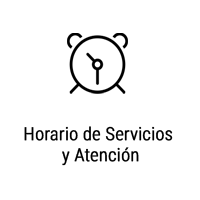
<style>
.page{position:relative;width:200px;height:200px;background:#ffffff}
.page>*{position:absolute;margin:0}
.t1{font:18px "RobotoCondensed-Light";color:#000000;font-weight:bold}
</style>
<div class="page">
<p class="t1" style="left:24px;top:126px;width:149px;height:40px;text-align:center">Horario de Servicios <br>y Atención</p>
</div>
